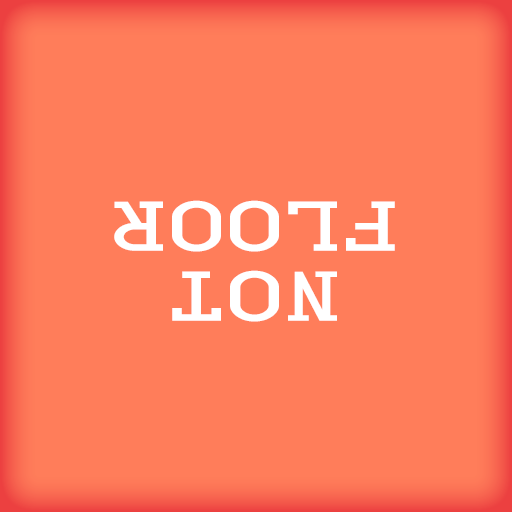
<style>
.page{position:relative;width:512px;height:512px;background:#ff7d5a}
.page>*{position:absolute;margin:0}
.t1{font:58.7px "CardCharacters";color:#ffffff;scale:1.52 1}
</style>
<div class="page">
<p class="t1" style="left:114px;top:200px;width:281px;height:122px;rotate:180deg">NOT FLOOR</p>
</div>
